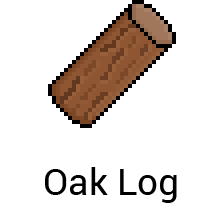
<style>
.page{position:relative;width:224px;height:203px;background:#ffffff}
.page>*{position:absolute;margin:0}
.t1{font:36.7px "Roboto-Regular";color:#000000}
</style>
<div class="page">
<p class="t1" style="left:45px;top:167px;width:132px;height:36px">Oak Log</p>
</div>
